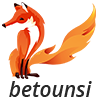
<style>
.page{position:relative;width:100px;height:100px;background:#ffffff}
.page>*{position:absolute;margin:0}
.t1{font:20.8px "OpenSans-SemiboldItalic";color:#282828}
</style>
<div class="page">
<p class="t1" style="left:9px;top:81px;width:83px;height:16px">betounsi</p>
</div>
